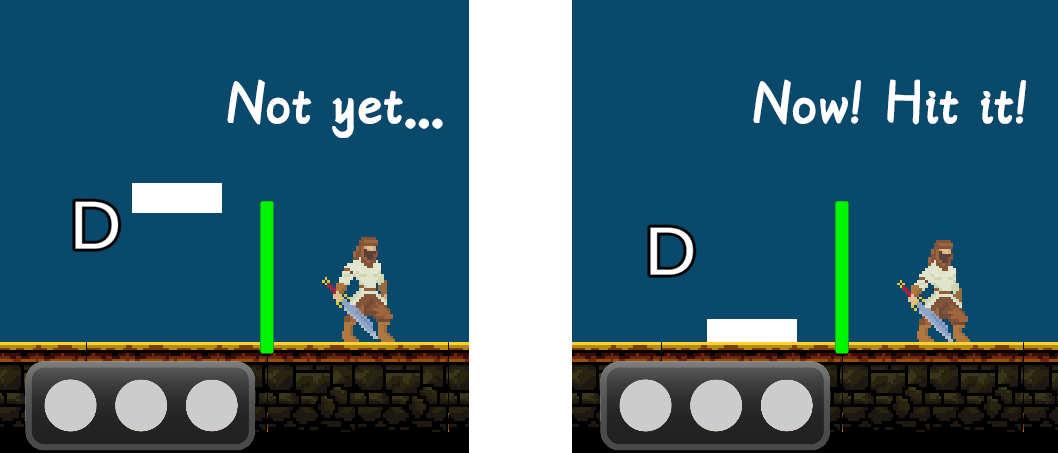
<style>
.page{position:relative;width:1058px;height:453px;background:#09496c}
.page>*{position:absolute;margin:0}
.t1{font:66.7px "YRDZST-Regular";color:#ffffff;font-weight:bold}
</style>
<div class="page">
<p class="t1" style="left:227px;top:79px;width:216px;height:59px">Not yet...</p>
<p class="t1" style="left:753px;top:79px;width:273px;height:46px">Now! Hit it!</p>
</div>
